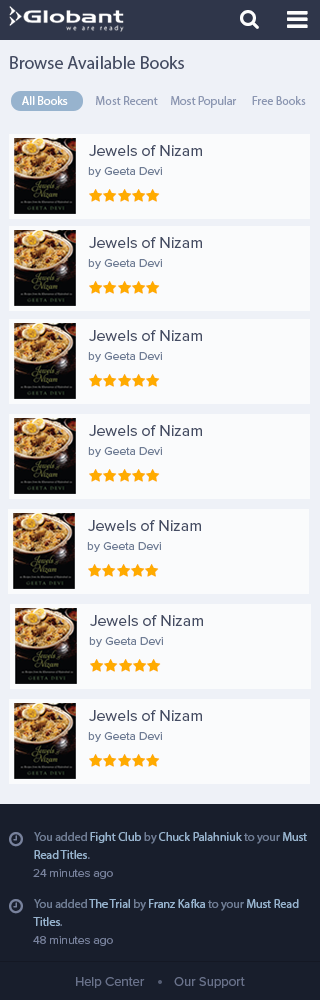
<style>
.page{position:relative;width:320px;height:1000px;background:#fafbfc}
.page>*{position:absolute;margin:0}
.t1{font:18px "MyriadPro-Regular";color:#444c63}
.t2{font:12px "MyriadPro-Regular";color:#8c97b2}
.t3{font:12px "MyriadPro-Regular";color:#ffffff}
.t4{font:16px "ProximaNova-Regular";color:#444c63}
.t5{font:12px "ProximaNova-Regular";color:#6f7d95}
.t6{font:12px/18px "MyriadPro-Regular";color:#97b3ce}
.t7{font:12px/18px "MyriadPro-Regular";color:#6f7d95}
.t8{font:12px "ProximaNova-Light";color:#78829d}
.t9{font:13px "ProximaNova-Regular";color:#78829d}
</style>
<div class="page">
<p class="t1" style="left:10px;top:56px;width:174px;height:13px">Browse Available Books</p>
<p class="t2" style="left:22px;top:96px;width:284px;height:12px"><span class="t3">All Books       </span>    Most Recent     Most Popular      Free Books</p>
<p class="t4" style="left:89px;top:145px;width:113px;height:11px">Jewels of Nizam</p>
<p class="t5" style="left:88px;top:167px;width:74px;height:10px">by Geeta Devi</p>
<p class="t4" style="left:89px;top:237px;width:113px;height:11px">Jewels of Nizam</p>
<p class="t5" style="left:88px;top:259px;width:74px;height:10px">by Geeta Devi</p>
<p class="t4" style="left:89px;top:330px;width:113px;height:11px">Jewels of Nizam</p>
<p class="t5" style="left:88px;top:352px;width:74px;height:10px">by Geeta Devi</p>
<p class="t4" style="left:89px;top:425px;width:113px;height:11px">Jewels of Nizam</p>
<p class="t5" style="left:88px;top:447px;width:74px;height:10px">by Geeta Devi</p>
<p class="t4" style="left:88px;top:520px;width:113px;height:11px">Jewels of Nizam</p>
<p class="t5" style="left:87px;top:542px;width:74px;height:10px">by Geeta Devi</p>
<p class="t4" style="left:90px;top:615px;width:113px;height:11px">Jewels of Nizam</p>
<p class="t5" style="left:89px;top:637px;width:74px;height:10px">by Geeta Devi</p>
<p class="t4" style="left:89px;top:710px;width:113px;height:11px">Jewels of Nizam</p>
<p class="t5" style="left:88px;top:732px;width:74px;height:10px">by Geeta Devi</p>
<p class="t6" style="left:34px;top:832px;width:273px;height:27px"><span class="t7">You added </span>Fight Club <span class="t7">by </span>Chuck Palahniuk<span class="t7"> to your </span>Must Read Titles<span class="t7">.</span></p>
<p class="t8" style="left:33px;top:869px;width:80px;height:10px">24 minutes ago</p>
<p class="t6" style="left:33px;top:899px;width:266px;height:27px"><span class="t7">You added </span>The Trial <span class="t7">by </span>Franz Kafka <span class="t7">to your </span>Must Read Titles<span class="t7">.</span></p>
<p class="t8" style="left:33px;top:936px;width:80px;height:10px">48 minutes ago</p>
<p class="t9" style="left:76px;top:977px;width:169px;height:11px">Help Center         Our Support</p>
</div>
